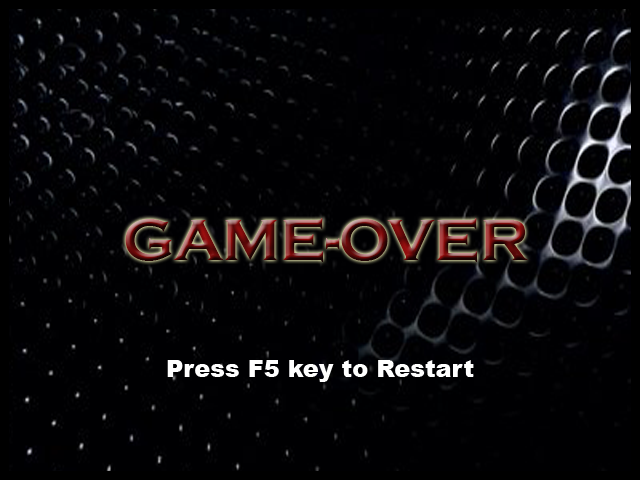
<style>
.page{position:relative;width:640px;height:480px;background:#000002}
.page>*{position:absolute;margin:0}
.t1{font:60px "CopperplateGothic-Bold"}
.t2{font:24px "Arial-Black";color:#ffffff}
.t3{font:18px "Arial-Black";color:#ff0000}
</style>
<div class="page">
<p class="t1" style="left:125px;top:218px;width:403px;height:44px">GAME-OVER</p>
<p class="t2" style="left:167px;top:360px;width:307px;height:22px"><span class="t3"><br></span>Press F5 key to Restart</p>
</div>
